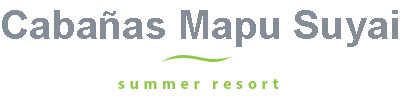
<style>
.page{position:relative;width:400px;height:100px;background:#ffffff}
.page>*{position:absolute;margin:0}
.t1{font:40px "Arial-BoldMT";color:#848d98}
</style>
<div class="page">
<p class="t1" style="left:2px;top:10px;width:396px;height:37px">Cabañas Mapu Suyai</p>
</div>
